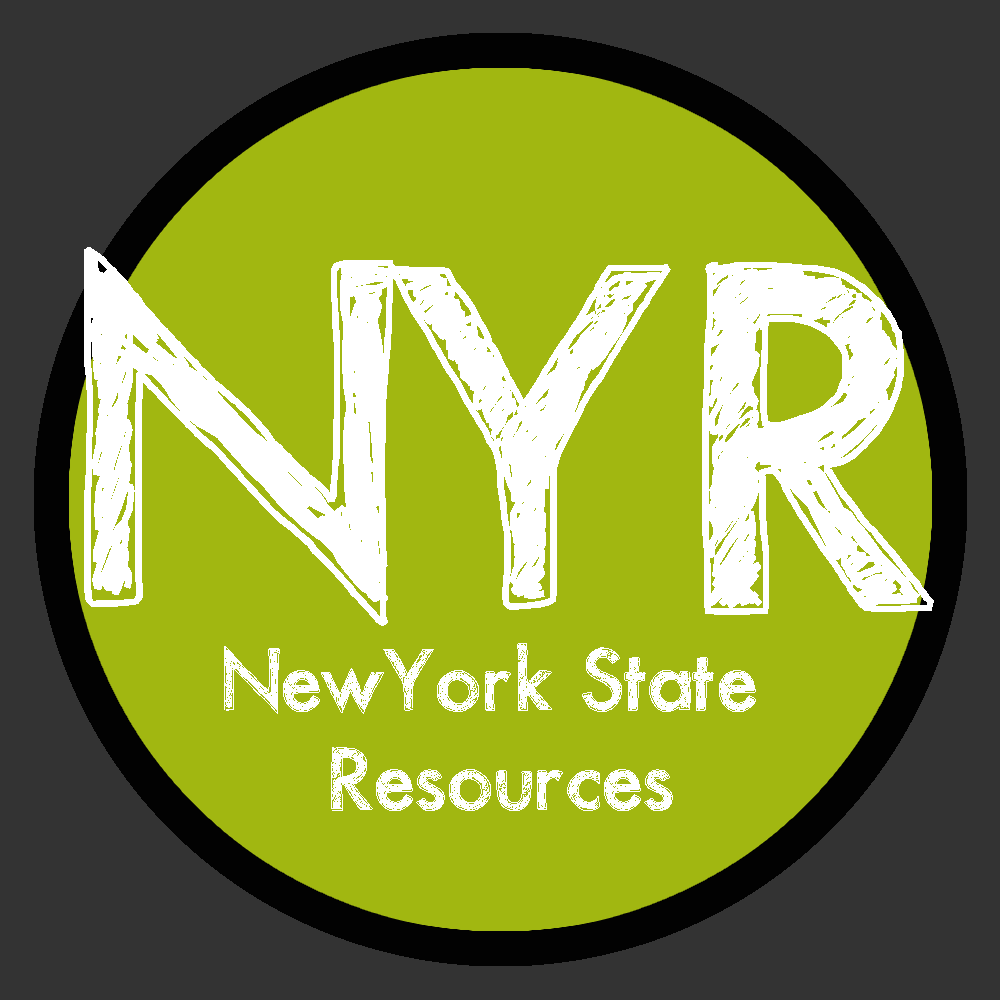
<style>
.page{position:relative;width:1000px;height:1000px;background:#a1b711}
.page>*{position:absolute;margin:0}
.t1{font:459.6px "Sketchy";color:#ffffff}
.t2{font:83px "Sketchy";color:#ffffff}
</style>
<div class="page">
<p class="t1" style="left:84px;top:247px;width:850px;height:379px">NYR</p>
<p class="t2" style="left:224px;top:643px;width:532px;height:168px;text-align:center">NewYork State <br>Resources</p>
</div>
